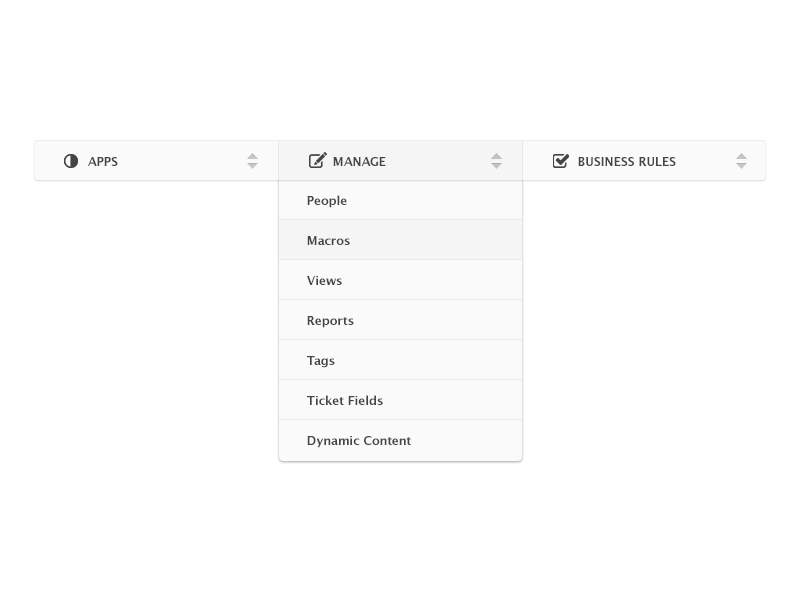
<style>
.page{position:relative;width:800px;height:600px;background:#ffffff}
.page>*{position:absolute;margin:0}
.t1{font:12px "LucidaGrande-Bold";color:#444444;text-transform:uppercase}
.t2{font:12px/40px "LucidaGrande-Bold";color:#444444}
</style>
<div class="page">
<p class="t1" style="left:88px;top:157px;width:30px;height:9px">Apps</p>
<p class="t1" style="left:333px;top:157px;width:53px;height:9px">Manage</p>
<p class="t1" style="left:578px;top:157px;width:98px;height:9px">Business Rules</p>
<p class="t2" style="left:307px;top:195px;width:104px;height:253px">People<br>Macros<br>Views<br>Reports<br>Tags<br>Ticket Fields<br>Dynamic Content</p>
</div>
